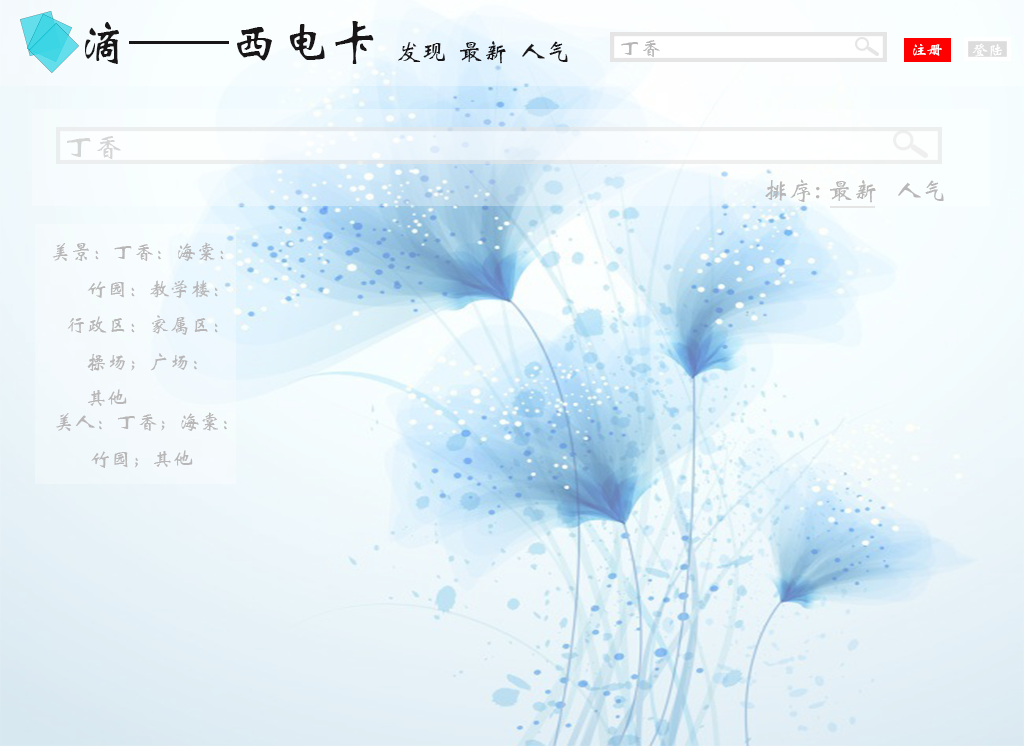
<style>
.page{position:relative;width:1024px;height:746px}
.page>*{position:absolute;margin:0}
.t1{font:50px "STXinwei";color:#181616}
.t2{font:25px "STXinwei";color:#181616}
.t3{font:20.8px "STXinwei";color:#b8b6b6}
.t4{font:16.4px "STXinwei";color:#fefefe}
.t5{font:29.2px "STXinwei";color:#d5d5d5}
.t6{font:25px "STXinwei";color:#b8b6b6}
</style>
<div class="page">
<p class="t1" style="left:85px;top:21px;width:289px;height:43px">滴——西电卡</p>
<p class="t2" style="left:398px;top:41px;width:170px;height:23px">发现  最新  人气</p>
<p class="t3" style="left:621px;top:40px;width:39px;height:17px">丁香</p>
<p class="t4" style="left:913px;top:44px;width:29px;height:12px">注册</p>
<p class="t4" style="left:972px;top:43px;width:30px;height:14px">登陆</p>
<p class="t5" style="left:67px;top:136px;width:54px;height:24px">丁香</p>
<p class="t6" style="left:765px;top:179px;width:179px;height:24px">排序: 最新   人气</p>
<p class="t3" style="left:52px;top:242px;width:172px;height:164px">美景：丁香：海棠：<br> 竹园：教学楼：<br>   行政区：家属区：<br> 操场；广场：<br> 其他</p>
<p class="t3" style="left:56px;top:412px;width:171px;height:56px">美人：丁香；海棠：<br> 竹园；其他</p>
</div>
